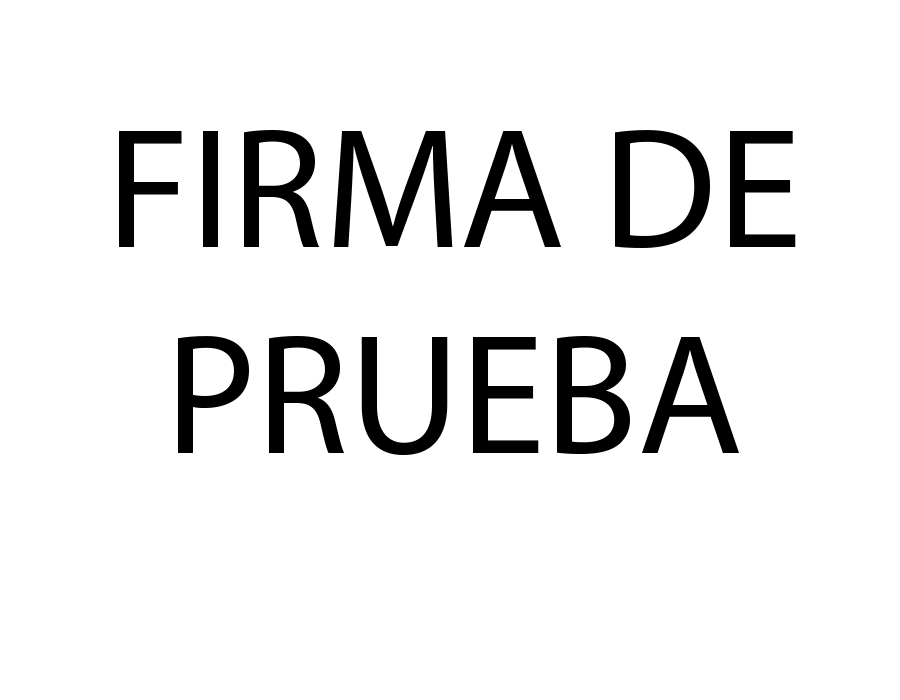
<style>
.page{position:relative;width:900px;height:700px;background:#ffffff}
.page>*{position:absolute;margin:0}
.t1{font:172px "MyriadPro-Regular";color:#000000}
</style>
<div class="page">
<p class="t1" style="left:119px;top:130px;width:677px;height:326px;text-align:center">FIRMA DE PRUEBA</p>
</div>
